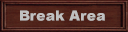
<style>
.page{position:relative;width:128px;height:32px}
.page>*{position:absolute;margin:0}
.t1{font:14px "Arial-Black";letter-spacing:0.005em;color:#c0c0c0}
</style>
<div class="page">
<p class="t1" style="left:20px;top:10px;width:85px;height:11px">Break Area</p>
</div>
